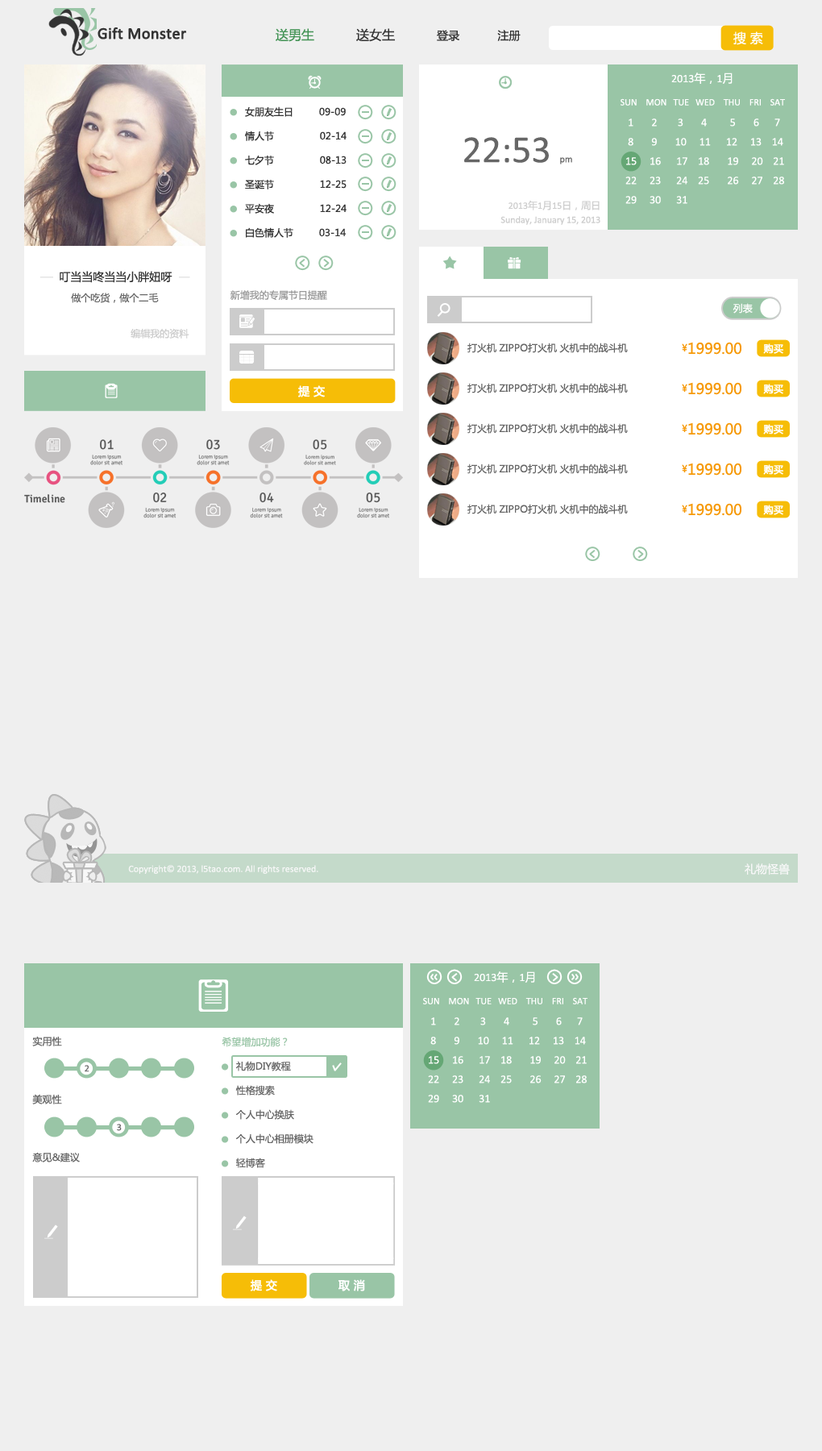
<style>
.page{position:relative;width:822px;height:1451px;background:#efefef}
.page>*{position:absolute;margin:0}
.t1{font:16.1px "Calibri";color:#333333;font-weight:bold}
.t2{font:11.3px "MicrosoftYaHei";color:#333333}
.t3{font:12.9px "MicrosoftYaHei";color:#439355}
.t4{font:12.9px "MicrosoftYaHei";color:#333333}
.t5{font:12.9px "MicrosoftYaHei";color:#ffffff}
.t6{font:11.3px "Calibri";color:#ffffff}
.t7{font:11.3px "MicrosoftYaHei";color:#ffffff}
.t8{font:11.3px/19.3px "Calibri";color:#ffffff}
.t9{font:9.7px/19.3px "Calibri";color:#ffffff}
.t10{font:9.7px "MicrosoftYaHei";color:#333333}
.t11{font:38.7px "Calibri";color:#666666}
.t12{font:9.7px "Calibri";color:#666666}
.t13{font:9.7px/14.5px "Calibri";color:#cccccc}
.t14{font:9.7px/14.5px "MicrosoftYaHei";color:#cccccc}
.t15{font:9.7px "MicrosoftYaHei";color:#666666}
.t16{font:9.7px "MicrosoftYaHei";color:#999999}
.t17{font:9.7px "MicrosoftYaHei";color:#ffffff}
.t18{font:9.7px "MicrosoftYaHei";color:#cccccc}
.t19{font:9.7px "MicrosoftYaHei";color:#f69907}
.t20{font:14.5px "MicrosoftYaHei";color:#f69907}
.t21{font:9.7px "MicrosoftYaHei";color:#ffffff;font-weight:bold}
.t22{font:11.3px "MicrosoftYaHei";color:#ffffff;font-weight:bold}
.t23{font:9.7px "Calibri";color:#ffffff}
.t24{font:9.7px/19.3px "MicrosoftYaHei";color:#666666}
.t25{font:9.7px "MicrosoftYaHei";color:#99c5a6}
</style>
<div class="page">
<p class="t1" style="left:98px;top:27px;width:88px;height:12px">Gift Monster</p>
<p class="t2" style="left:276px;top:28px;width:245px;height:14px"><span class="t3">送男生</span><span class="t4">           送女生           </span>登录          注册</p>
<p class="t5" style="left:733px;top:31px;width:30px;height:14px">搜 索</p>
<p class="t6" style="left:671px;top:73px;width:62px;height:11px">2013<span class="t7">年，</span>1<span class="t7">月</span></p>
<p class="t8" style="left:621px;top:98px;width:164px;height:106px"><span class="t9">SUN    MON   TUE   WED    THU    FRI    SAT<br></span>   1       2        3       4         5       6      7<br>   8       9       10     11      12     13    14<br>  15     16      17    18       19     20    21<br>  22     23      24    25       26     27    28<br>  29     30      31</p>
<p class="t10" style="left:245px;top:106px;width:101px;height:11px">女朋友生日         09-09</p>
<p class="t10" style="left:245px;top:131px;width:102px;height:10px">情人节                02-14</p>
<p class="t11" style="left:464px;top:137px;width:108px;height:27px">22:53 <span class="t12">pm</span></p>
<p class="t10" style="left:245px;top:156px;width:102px;height:9px">七夕节                08-13</p>
<p class="t10" style="left:245px;top:180px;width:102px;height:9px">圣诞节                12-25</p>
<p class="t10" style="left:245px;top:203px;width:102px;height:11px">平安夜                12-24</p>
<p class="t13" style="left:500px;top:200px;width:100px;height:25px;text-align:right">2013<span class="t14">年</span>1<span class="t14">月</span>15<span class="t14">日，周日<br></span>Sunday, January 15, 2013</p>
<p class="t10" style="left:246px;top:227px;width:100px;height:11px">白色情人节         03-14</p>
<p class="t2" style="left:60px;top:271px;width:112px;height:12px">叮当当咚当当小胖妞呀</p>
<p class="t15" style="left:71px;top:293px;width:88px;height:10px">做个吃货，做个二毛</p>
<p class="t16" style="left:230px;top:290px;width:97px;height:11px">新增我的专属节日提醒</p>
<p class="t17" style="left:733px;top:303px;width:20px;height:10px">列表</p>
<p class="t18" style="left:131px;top:328px;width:58px;height:10px">编辑我的资料</p>
<p class="t15" style="left:467px;top:342px;width:274px;height:13px">打火机 ZIPPO打火机 火机中的战斗机                   <span class="t19">¥</span><span class="t20">1999.00</span></p>
<p class="t21" style="left:763px;top:343px;width:20px;height:11px">购买</p>
<p class="t22" style="left:298px;top:385px;width:27px;height:12px">提 交</p>
<p class="t15" style="left:467px;top:382px;width:274px;height:13px">打火机 ZIPPO打火机 火机中的战斗机                   <span class="t19">¥</span><span class="t20">1999.00</span></p>
<p class="t21" style="left:763px;top:384px;width:20px;height:10px">购买</p>
<p class="t15" style="left:467px;top:422px;width:274px;height:13px">打火机 ZIPPO打火机 火机中的战斗机                   <span class="t19">¥</span><span class="t20">1999.00</span></p>
<p class="t21" style="left:763px;top:424px;width:20px;height:10px">购买</p>
<p class="t15" style="left:467px;top:463px;width:274px;height:12px">打火机 ZIPPO打火机 火机中的战斗机                   <span class="t19">¥</span><span class="t20">1999.00</span></p>
<p class="t21" style="left:763px;top:464px;width:20px;height:11px">购买</p>
<p class="t15" style="left:467px;top:503px;width:274px;height:13px">打火机 ZIPPO打火机 火机中的战斗机                   <span class="t19">¥</span><span class="t20">1999.00</span></p>
<p class="t21" style="left:763px;top:504px;width:20px;height:11px">购买</p>
<p class="t23" style="left:128px;top:865px;width:190px;height:9px">Copyright© 2013, l5tao.com. All rights reserved.</p>
<p class="t7" style="left:745px;top:863px;width:45px;height:11px">礼物怪兽</p>
<p class="t24" style="left:32px;top:1036px;width:48px;height:126px">实用性<br><br><br>美观性<br><br><br>意见&amp;建议</p>
<p class="t25" style="left:222px;top:1036px;width:66px;height:11px">希望增加功能？</p>
<p class="t15" style="left:236px;top:1061px;width:55px;height:10px">礼物DIY教程</p>
<p class="t12" style="left:85px;top:1065px;width:4px;height:7px">2</p>
<p class="t15" style="left:235px;top:1085px;width:40px;height:10px">性格搜索</p>
<p class="t15" style="left:235px;top:1109px;width:59px;height:10px">个人中心换肤</p>
<p class="t12" style="left:117px;top:1123px;width:5px;height:8px">3</p>
<p class="t15" style="left:235px;top:1133px;width:78px;height:11px">个人中心相册模块</p>
<p class="t15" style="left:236px;top:1157px;width:29px;height:11px">轻博客</p>
<p class="t22" style="left:250px;top:1279px;width:27px;height:12px">提 交</p>
<p class="t22" style="left:338px;top:1279px;width:27px;height:12px">取 消</p>
</div>
